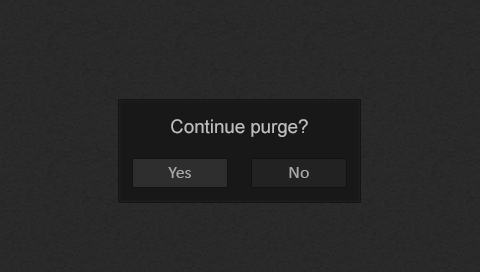
<style>
.page{position:relative;width:480px;height:272px;background:#282828}
.page>*{position:absolute;margin:0}
.t1{font:18.7px "ArialMT";color:#bebebe}
</style>
<div class="page">
<p class="t1" style="left:171px;top:119px;width:137px;height:18px">Continue purge?</p>
</div>
